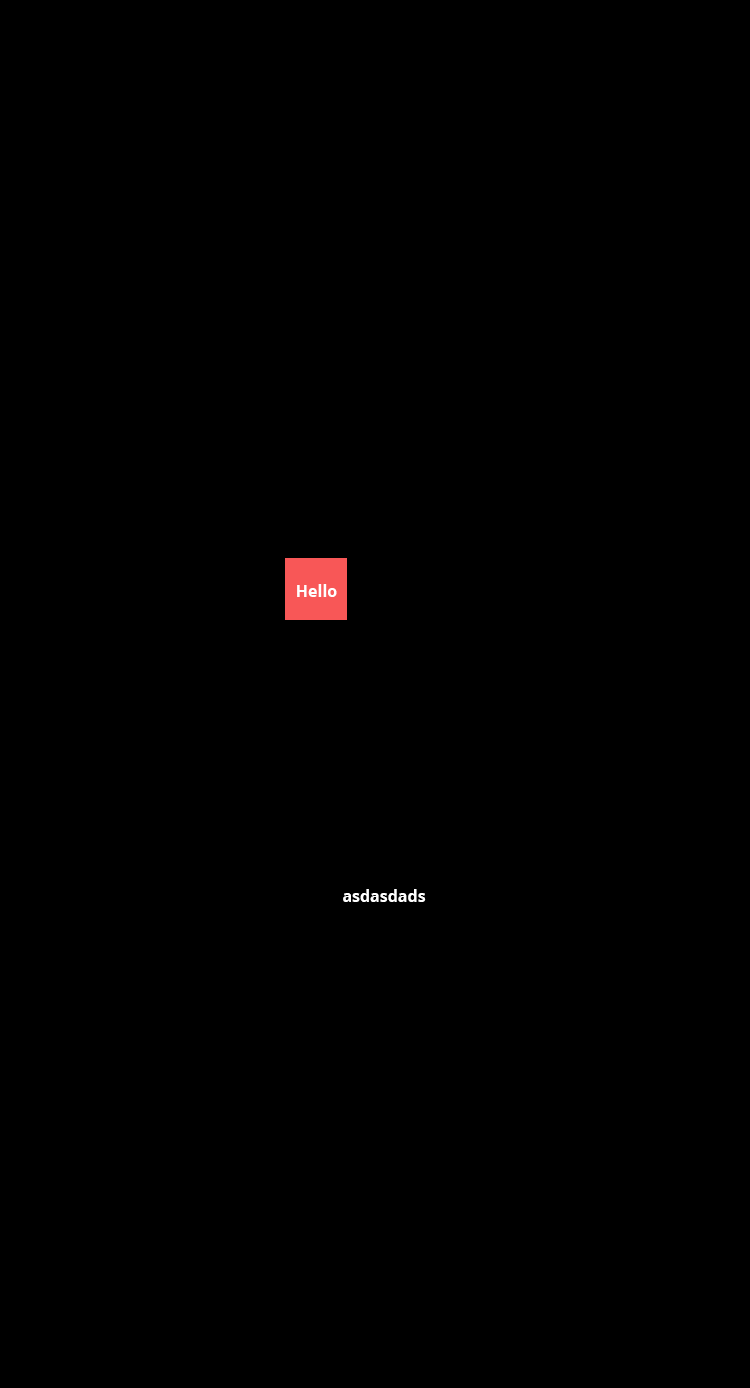
<style>
.page{position:relative;width:750px;height:1388px;background:#000000}
.page>*{position:absolute;margin:0}
.t1{font:16px "OpenSans-Bold";color:#ffffff}
</style>
<div class="page">
<p class="t1" style="left:297px;top:584px;width:40px;height:13px">Hello</p>
<p class="t1" style="left:343px;top:889px;width:83px;height:13px">asdasdads</p>
</div>
